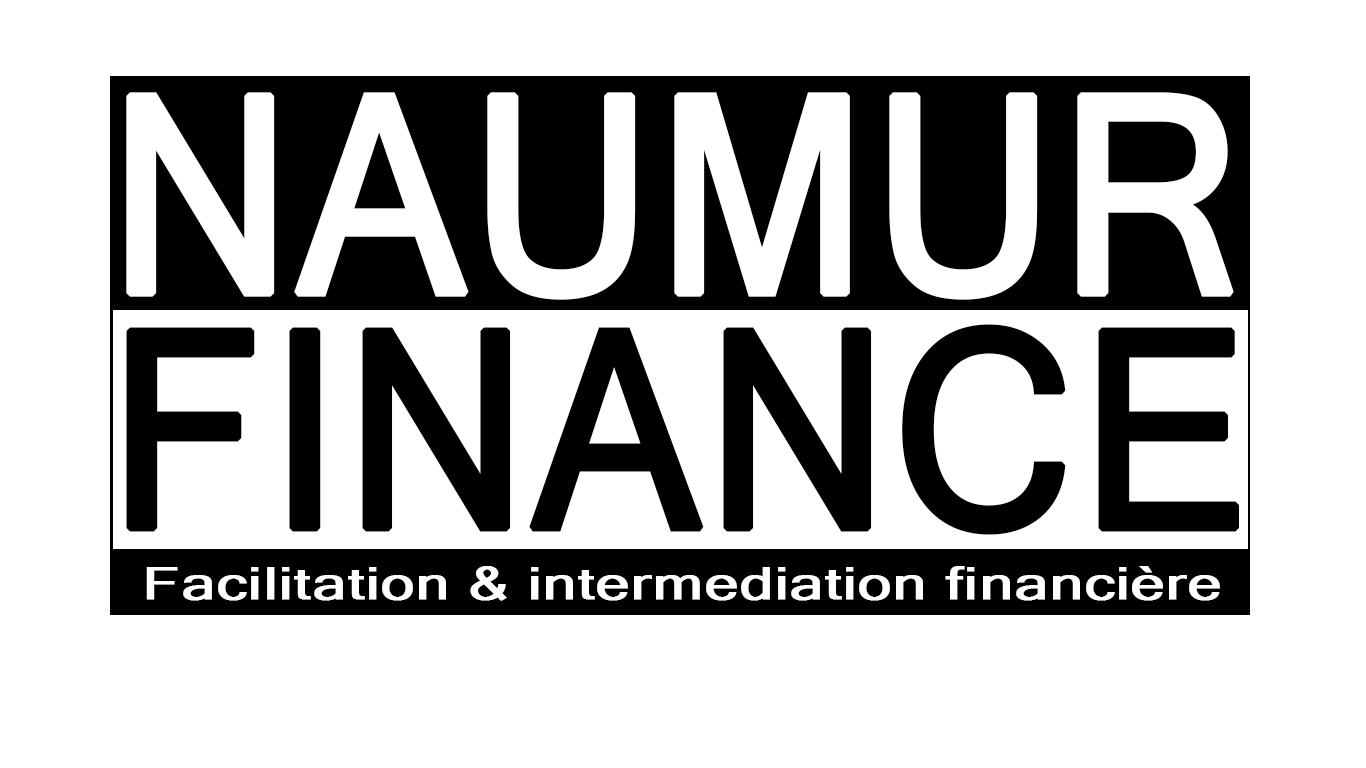
<style>
.page{position:relative;width:1366px;height:768px;background:#ffffff}
.page>*{position:absolute;margin:0}
.t1{font:275px "MicrosoftSansSerif";color:#ffffff;text-transform:uppercase;font-weight:bold;scale:0.91 1}
.t2{font:275px "MicrosoftSansSerif";color:#000000;text-transform:uppercase;font-weight:bold;scale:0.91 1}
.t3{font:45px "MicrosoftSansSerif";color:#ffffff;font-weight:bold;scale:1.33 1}
</style>
<div class="page">
<p class="t1" style="left:126px;top:92px;width:1108px;height:208px">NAUMUR</p>
<p class="t2" style="left:126px;top:324px;width:1113px;height:211px">FINANCE</p>
<p class="t3" style="left:146px;top:566px;width:1074px;height:35px">Facilitation &amp; intermediation financière</p>
</div>
